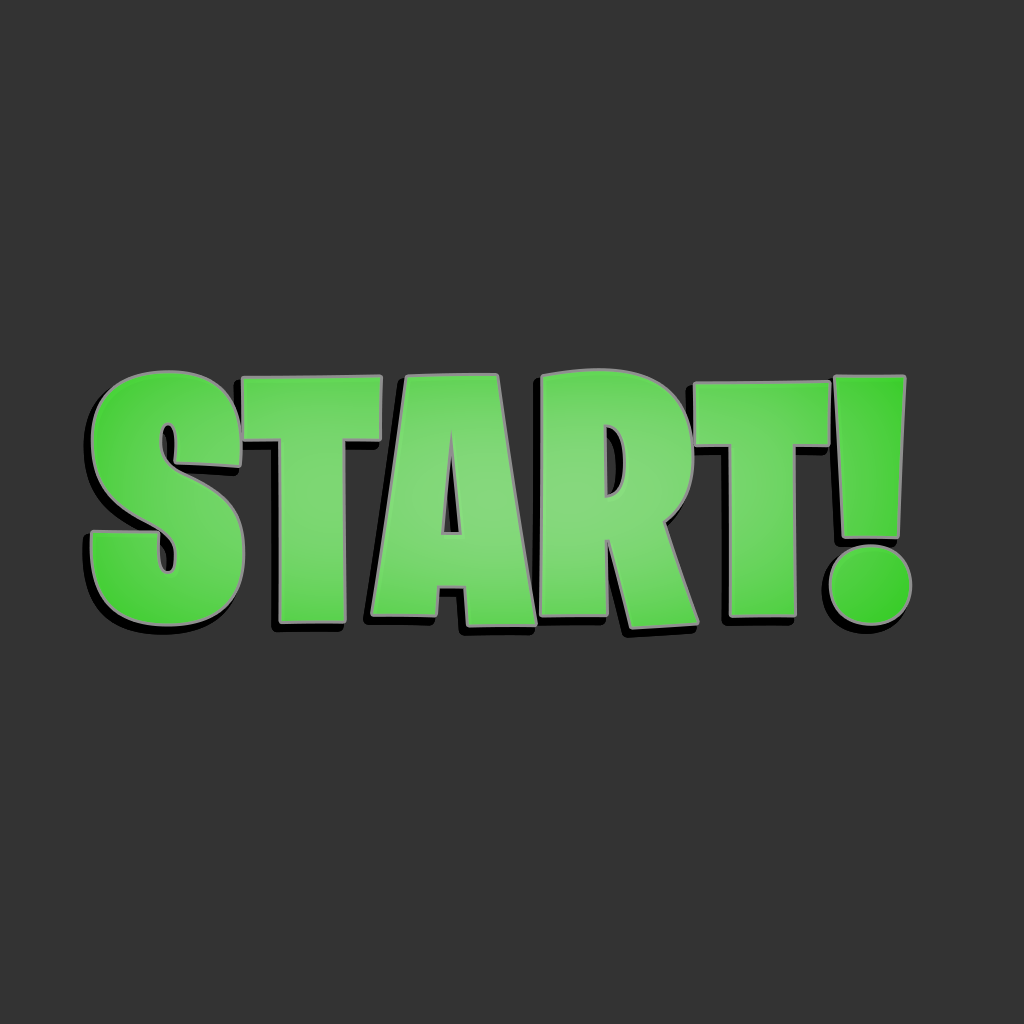
<style>
.page{position:relative;width:1024px;height:1024px;background:#333333}
.page>*{position:absolute;margin:0}
.t1{font:346.1px "BurbankBigCondensed-Black"}
</style>
<div class="page">
<p class="t1" style="left:92px;top:371px;width:818px;height:256px">START!</p>
</div>
